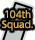
<style>
.page{position:relative;width:35px;height:40px;background:#000000}
.page>*{position:absolute;margin:0}
.t1{font:9px/10px "UDShinGoPro-Light";color:#d5ae47;font-weight:bold}
</style>
<div class="page">
<p class="t1" style="left:1px;top:10px;width:32px;height:21px;text-align:center">104th<br>Squad.</p>
</div>
